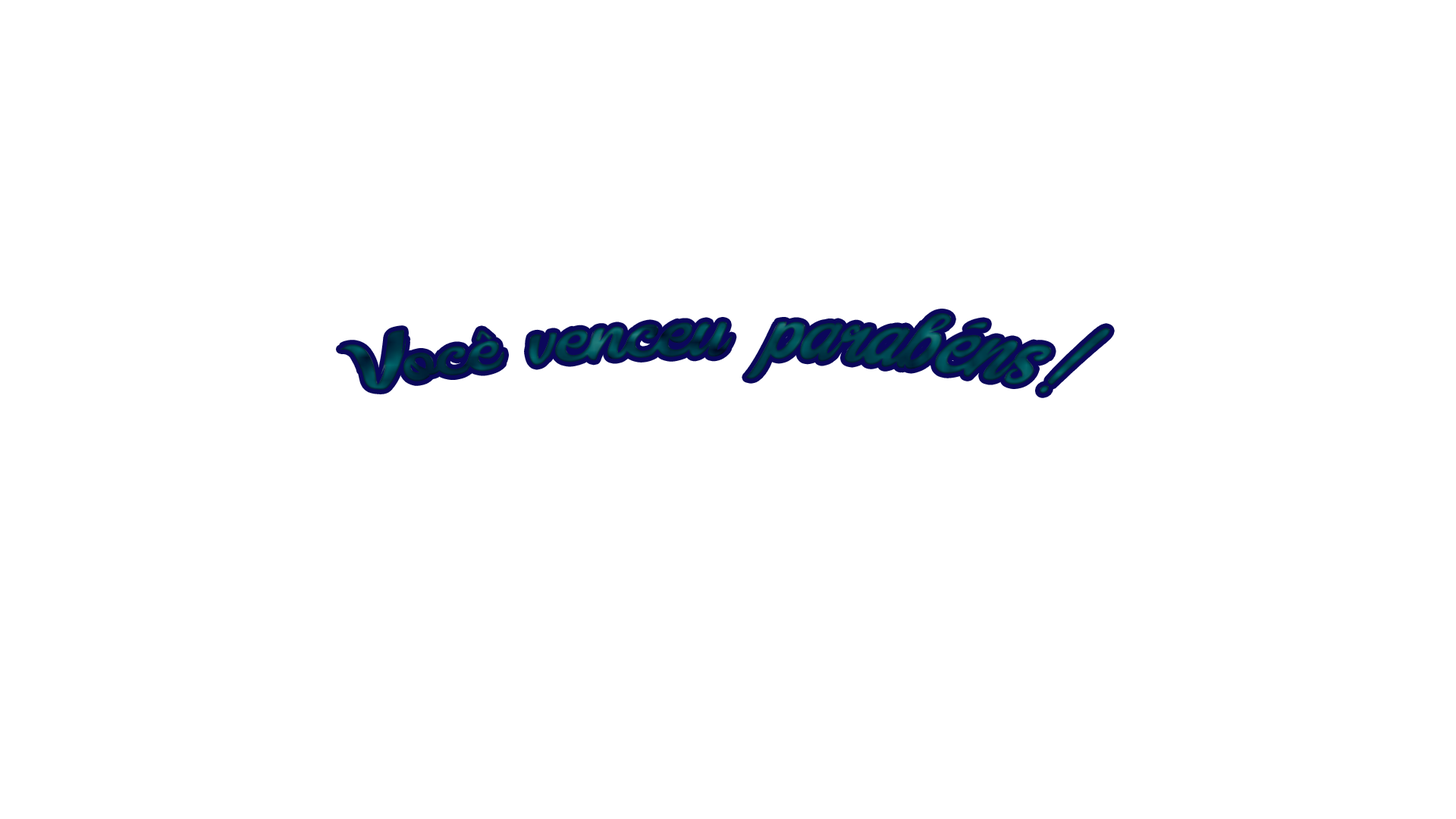
<style>
.page{position:relative;width:1456px;height:819px;background:#ffffff}
.page>*{position:absolute;margin:0}
.t1{font:91px "Epines";color:#003a47}
</style>
<div class="page">
<p class="t1" style="left:340px;top:313px;width:770px;height:81px">Você venceu parabéns!</p>
</div>
